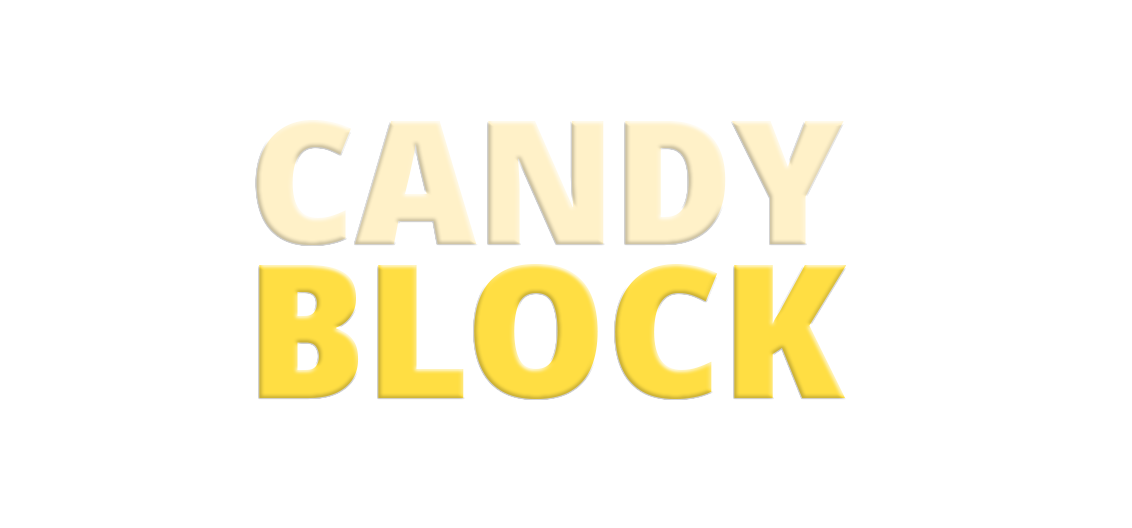
<style>
.page{position:relative;width:1132px;height:528px;background:#ffffff}
.page>*{position:absolute;margin:0}
.t1{font:172.9px/154px "NotoSansDisplay-Black";color:#fff1c8}
.t2{font:186.9px/154px "NotoSansDisplay-Black";color:#ffde43}
</style>
<div class="page">
<p class="t1" style="left:256px;top:120px;width:590px;height:279px;text-align:center">CANDY<br><span class="t2">BLOCK</span></p>
</div>
